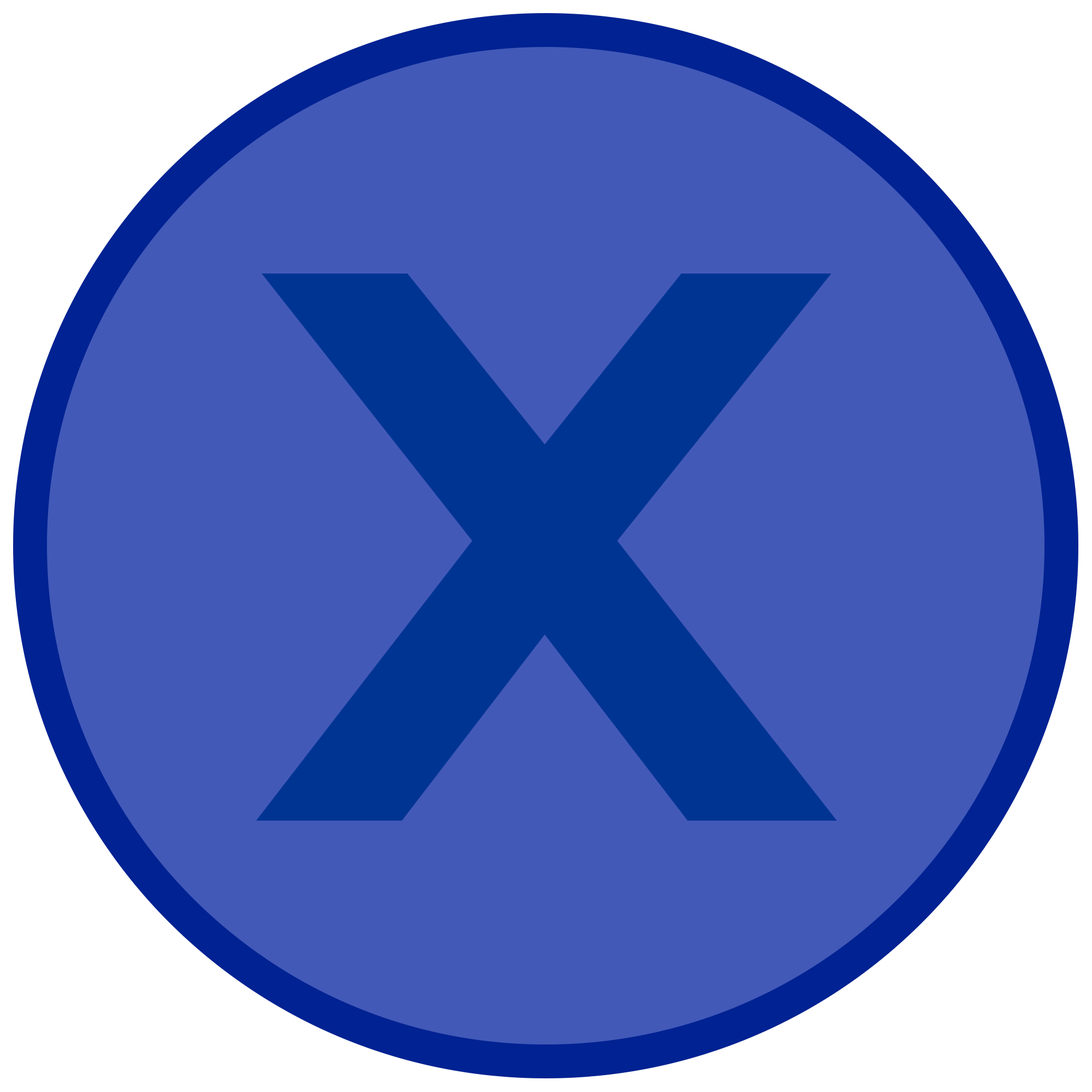
<style>
.page{position:relative;width:1092px;height:1092px;background:#4259b8}
.page>*{position:absolute;margin:0}
.t1{font:665px "RabbidHighwaySignII";color:#003493;scale:1.06 1}
</style>
<div class="page">
<p class="t1" style="left:256px;top:274px;width:581px;height:547px">X</p>
</div>
